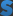
<style>
.page{position:relative;width:13px;height:16px}
.page>*{position:absolute;margin:0}
.t1{font:21.4px "AvenirNext-Heavy";color:#307bbe}
</style>
<div class="page">
<p class="t1" style="left:0px;top:0px;width:13px;height:16px">S</p>
</div>
